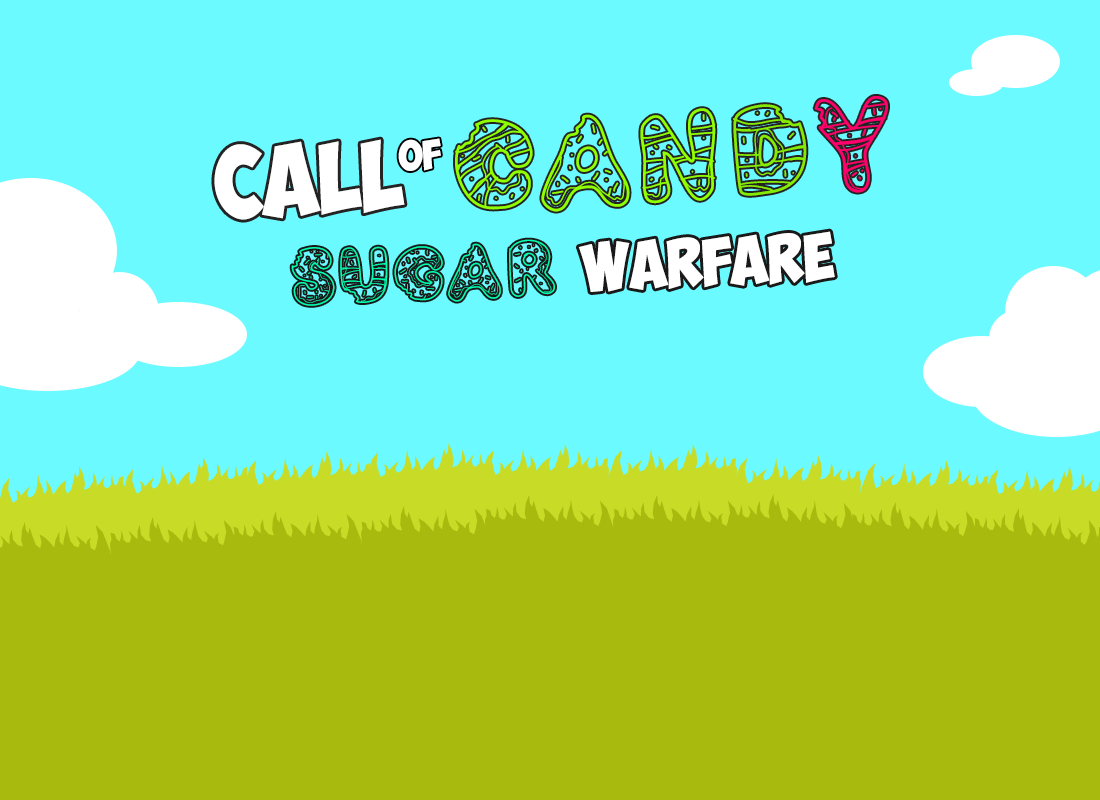
<style>
.page{position:relative;width:1100px;height:800px;background:#6bfaff}
.page>*{position:absolute;margin:0}
.t1{font:120px "PWYummyDonuts";color:#90ff00}
.t2{font:120px "PWYummyDonuts";color:#86eb03}
.t3{font:120px "PWYummyDonuts";color:#ff006c}
.t4{font:72px "ObelixPro";color:#ffffff}
.t5{font:30px "ObelixPro";color:#ffffff}
.t6{font:48px "ObelixPro";color:#ffffff}
.t7{font:72px "PWYummyDonuts";color:#00ffb4}
</style>
<div class="page">
<p class="t1" style="left:455px;top:96px;width:433px;height:116px;rotate:-2deg">Can<span class="t2">d</span><span class="t3">y</span></p>
<p class="t4" style="left:214px;top:139px;width:191px;height:81px;rotate:-2deg">Call</p>
<p class="t5" style="left:398px;top:138px;width:43px;height:33px;rotate:-2deg">of</p>
<p class="t6" style="left:578px;top:231px;width:257px;height:61px;rotate:-2deg">Warfare</p>
<p class="t7" style="left:291px;top:239px;width:264px;height:67px;rotate:-2deg">Sugar</p>
</div>
